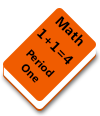
<style>
.page{position:relative;width:100px;height:116px;background:#ffffff}
.page>*{position:absolute;margin:0}
.t1{font:14.2px "LaoUI-Bold";color:#000000}
.t2{font:11.4px "LaoUI-Bold";color:#000000}
</style>
<div class="page">
<p class="t1" style="left:55px;top:16px;width:28px;height:31px;rotate:45deg">Math</p>
<p class="t1" style="left:36px;top:28px;width:38px;height:37px;rotate:45deg">1+1=4</p>
<p class="t2" style="left:21px;top:49px;width:34px;height:34px;text-align:center;rotate:45deg">Period <br>One</p>
</div>
